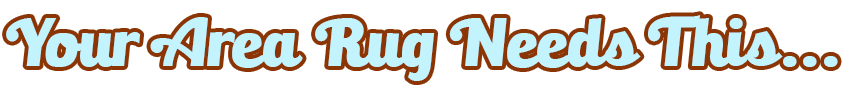
<style>
.page{position:relative;width:844px;height:94px;background:#ffffff}
.page>*{position:absolute;margin:0}
.t1{font:62.2px "BullettoKilla";color:#c3f3fd}
</style>
<div class="page">
<p class="t1" style="left:6px;top:15px;width:832px;height:66px">Your Area Rug Needs This...</p>
</div>
